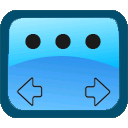
<style>
.page{position:relative;width:128px;height:128px}
.page>*{position:absolute;margin:0}
.t1{font:100px "StoneSansSemITCTTSemi";color:#1b1b1b}
</style>
<div class="page">
<p class="t1" style="left:25px;top:34px;width:76px;height:15px">...</p>
</div>
